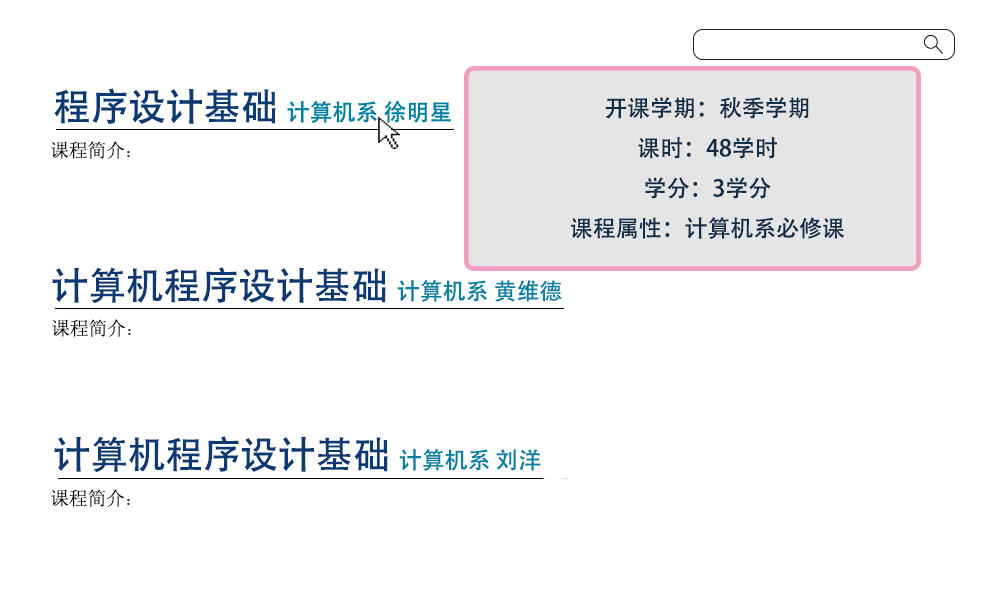
<style>
.page{position:relative;width:1000px;height:613px;background:#ffffff}
.page>*{position:absolute;margin:0}
.t1{font:22.9px "AdobeHeitiStd-Regular";color:#102d4a}
.t2{font:18.8px "SimSun";color:#000000}
.t3{font:16.7px "SimSun";color:#102d4a}
.t4{font:37.5px "AdobeHeitiStd-Regular";color:#0c3972}
.t5{font:22.9px "AdobeHeitiStd-Regular";color:#007fa2}
</style>
<div class="page">
<p class="t1" style="left:571px;top:97px;width:273px;height:142px;text-align:center">开课学期：秋季学期<br>课时：48学时<br>学分：3学分<br>课程属性：计算机系必修课</p>
<p class="t2" style="left:50px;top:141px;width:80px;height:18px">课程简介<span class="t3">：</span></p>
<p class="t4" style="left:52px;top:267px;width:510px;height:36px">计算机程序设计基础 <span class="t5">计算机系 黄维德</span></p>
<p class="t2" style="left:51px;top:319px;width:80px;height:18px">课程简介<span class="t3">：</span></p>
<p class="t4" style="left:54px;top:436px;width:487px;height:36px">计算机程序设计基础 <span class="t5">计算机系 刘洋</span></p>
<p class="t2" style="left:50px;top:489px;width:80px;height:18px">课程简介<span class="t3">：</span></p>
</div>
